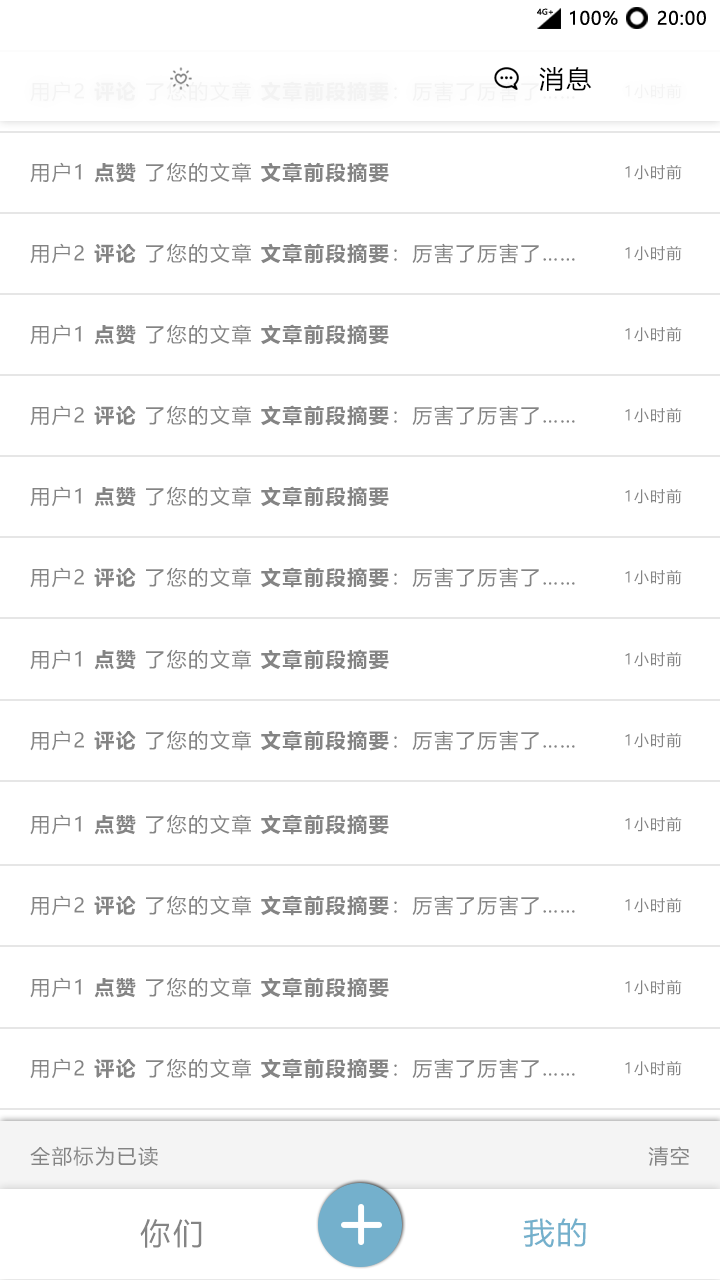
<style>
.page{position:relative;width:720px;height:1280px;background:#ffffff}
.page>*{position:absolute;margin:0}
.t1{font:7.8px "MicrosoftYaHei";letter-spacing:0.01em;color:#0f0f0f;scale:1.03 1}
.t2{font:18px "MicrosoftYaHei";letter-spacing:0.05em;color:#000000}
.t3{font:25px "MicrosoftYaHei";letter-spacing:0.1em;color:#000000}
.t4{font:15px "MicrosoftYaHei";letter-spacing:0.08em;color:#f3f3f3}
.t5{font:20px "MicrosoftYaHei-Bold";letter-spacing:0.08em;color:#848484}
.t6{font:20px "MicrosoftYaHei";letter-spacing:0.08em;color:#848484}
.t7{font:15px "MicrosoftYaHei";letter-spacing:0.08em;color:#848484}
.t8{font:30px "MicrosoftYaHei";letter-spacing:0.1em;color:#848484}
.t9{font:30px "MicrosoftYaHei";letter-spacing:0.08em;color:#74b0cc;scale:1.03 1}
</style>
<div class="page">
<p class="t1" style="left:537px;top:8px;width:16px;height:7px">4G+</p>
<p class="t2" style="left:570px;top:10px;width:48px;height:15px">100%</p>
<p class="t2" style="left:657px;top:10px;width:49px;height:15px">20:00</p>
<p class="t3" style="left:539px;top:67px;width:53px;height:24px">消息</p>
<p class="t4" style="left:625px;top:84px;width:57px;height:15px">1小时前</p>
<p class="t5" style="left:30px;top:162px;width:359px;height:21px"><span class="t6">用户1 </span>点赞<span class="t6"> 了您的文章 </span>文章前段摘要</p>
<p class="t7" style="left:625px;top:165px;width:57px;height:15px">1小时前</p>
<p class="t6" style="left:30px;top:243px;width:545px;height:21px">用户2 <span class="t5">评论</span> 了您的文章 <span class="t5">文章前段摘要</span>：厉害了厉害了……</p>
<p class="t7" style="left:625px;top:246px;width:57px;height:15px">1小时前</p>
<p class="t5" style="left:30px;top:324px;width:359px;height:21px"><span class="t6">用户1 </span>点赞<span class="t6"> 了您的文章 </span>文章前段摘要</p>
<p class="t7" style="left:625px;top:327px;width:57px;height:15px">1小时前</p>
<p class="t6" style="left:30px;top:405px;width:545px;height:21px">用户2 <span class="t5">评论</span> 了您的文章 <span class="t5">文章前段摘要</span>：厉害了厉害了……</p>
<p class="t7" style="left:625px;top:408px;width:57px;height:15px">1小时前</p>
<p class="t5" style="left:30px;top:486px;width:359px;height:21px"><span class="t6">用户1 </span>点赞<span class="t6"> 了您的文章 </span>文章前段摘要</p>
<p class="t7" style="left:625px;top:489px;width:57px;height:15px">1小时前</p>
<p class="t6" style="left:30px;top:567px;width:545px;height:21px">用户2 <span class="t5">评论</span> 了您的文章 <span class="t5">文章前段摘要</span>：厉害了厉害了……</p>
<p class="t7" style="left:625px;top:570px;width:57px;height:15px">1小时前</p>
<p class="t5" style="left:30px;top:649px;width:359px;height:21px"><span class="t6">用户1 </span>点赞<span class="t6"> 了您的文章 </span>文章前段摘要</p>
<p class="t7" style="left:625px;top:652px;width:57px;height:15px">1小时前</p>
<p class="t6" style="left:30px;top:730px;width:545px;height:21px">用户2 <span class="t5">评论</span> 了您的文章 <span class="t5">文章前段摘要</span>：厉害了厉害了……</p>
<p class="t7" style="left:625px;top:733px;width:57px;height:15px">1小时前</p>
<p class="t5" style="left:30px;top:814px;width:359px;height:21px"><span class="t6">用户1 </span>点赞<span class="t6"> 了您的文章 </span>文章前段摘要</p>
<p class="t7" style="left:625px;top:817px;width:57px;height:15px">1小时前</p>
<p class="t6" style="left:30px;top:895px;width:545px;height:21px">用户2 <span class="t5">评论</span> 了您的文章 <span class="t5">文章前段摘要</span>：厉害了厉害了……</p>
<p class="t7" style="left:625px;top:898px;width:57px;height:15px">1小时前</p>
<p class="t5" style="left:30px;top:977px;width:359px;height:21px"><span class="t6">用户1 </span>点赞<span class="t6"> 了您的文章 </span>文章前段摘要</p>
<p class="t7" style="left:625px;top:980px;width:57px;height:15px">1小时前</p>
<p class="t6" style="left:30px;top:1058px;width:545px;height:21px">用户2 <span class="t5">评论</span> 了您的文章 <span class="t5">文章前段摘要</span>：厉害了厉害了……</p>
<p class="t7" style="left:625px;top:1061px;width:57px;height:15px">1小时前</p>
<p class="t6" style="left:30px;top:1146px;width:128px;height:20px">全部标为已读</p>
<p class="t6" style="left:648px;top:1146px;width:42px;height:20px">清空</p>
<p class="t8" style="left:140px;top:1219px;width:62px;height:29px">你们</p>
<p class="t9" style="left:523px;top:1218px;width:63px;height:30px">我的</p>
</div>
